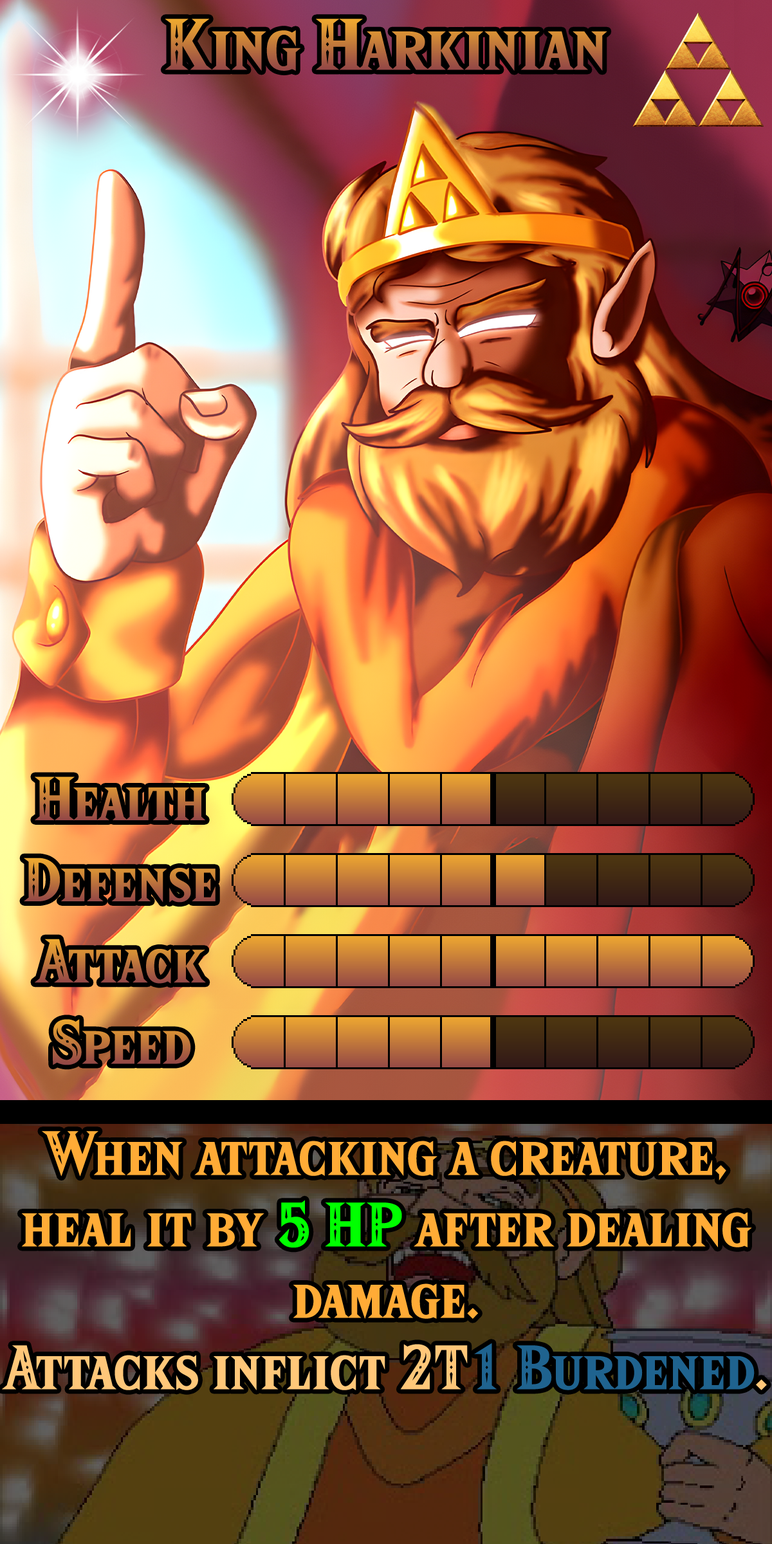
<style>
.page{position:relative;width:772px;height:1544px}
.page>*{position:absolute;margin:0}
.t1{font:108.7px "HyliaSerifBeta-Regular"}
.t2{font:92.7px "HyliaSerifBeta-Regular"}
.t3{font:93.9px/71.4px "HyliaSerifBeta-Regular";color:#ffab36}
.t4{font:93.9px/71.4px "HyliaSerifBeta-Regular";color:#00ff00}
.t5{font:93.9px/71.4px "HyliaSerifBeta-Regular";color:#ffc779}
.t6{font:93.9px/71.4px "HyliaSerifBeta-Regular";color:#1f638f}
</style>
<div class="page">
<p class="t1" style="left:165px;top:19px;width:442px;height:52px">King Harkinian</p>
<p class="t2" style="left:35px;top:777px;width:170px;height:43px">Health</p>
<p class="t2" style="left:24px;top:858px;width:192px;height:45px">Defense</p>
<p class="t2" style="left:35px;top:939px;width:171px;height:45px">Attack</p>
<p class="t2" style="left:53px;top:1019px;width:138px;height:47px">Speed</p>
<p class="t3" style="left:2px;top:1131px;width:765px;height:260px;text-align:center">When attacking a creature, heal it by <span class="t4">5 HP</span> after dealing damage.<br><span class="t5">Attacks inflict 2T</span><span class="t6">1 Burdened</span><span class="t5">.</span></p>
</div>
